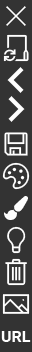
<style>
.page{position:relative;width:32px;height:352px;background:#333333}
.page>*{position:absolute;margin:0}
.t1{font:16px "Roboto-Bold";color:#ffffff}
</style>
<div class="page">
<p class="t1" style="left:1px;top:331px;width:30px;height:11px">URL</p>
</div>
